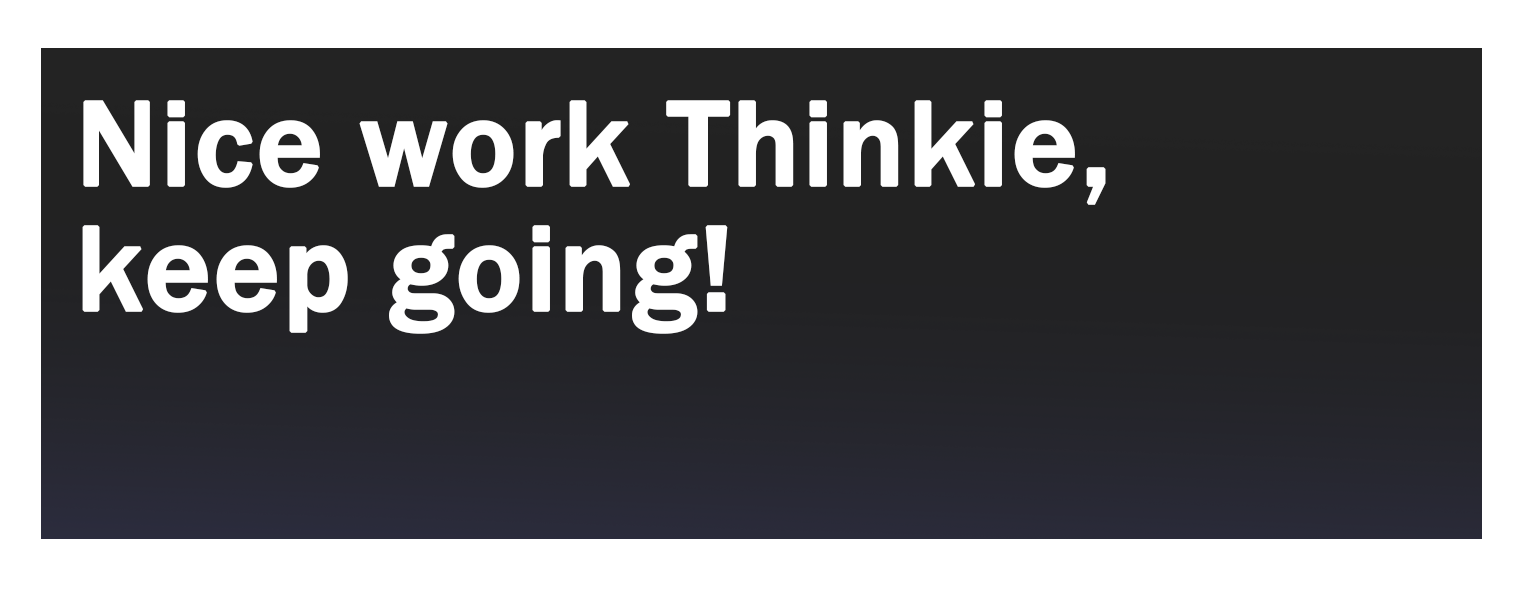
<style>
.page{position:relative;width:1528px;height:596px;background:#ffffff}
.page>*{position:absolute;margin:0}
.t1{font:125px/125px "FranklinGothic-Medium";color:#ffffff;font-weight:bold}
</style>
<div class="page">
<p class="t1" style="left:82px;top:100px;width:1024px;height:234px">Nice work Thinkie,<br>keep going!</p>
</div>
